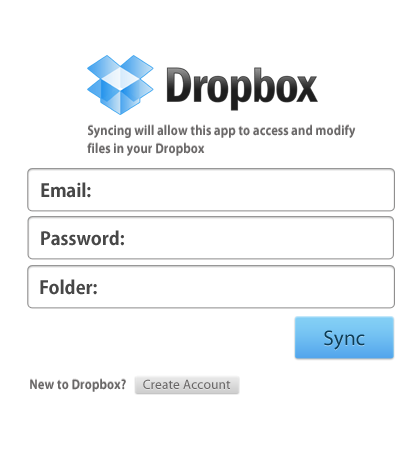
<style>
.page{position:relative;width:420px;height:450px;background:#ffffff}
.page>*{position:absolute;margin:0}
.t1{font:12px/18px "AdobeGothicStd-Bold";letter-spacing:0.008em}
.t2{font:12px/18px "AdobeGothicStd-Bold";letter-spacing:0.008em;color:#696767}
.t3{font:18px "AdobeGothicStd-Bold";color:#474747}
.t4{font:21.1px "MyriadPro-Regular";letter-spacing:0.008em;color:#0d3c54}
.t5{font:12px "AdobeGothicStd-Bold";letter-spacing:0.008em}
.t6{font:12px "AdobeGothicStd-Bold";letter-spacing:0.008em;color:#696767}
.t7{font:13.4px "MyriadPro-Regular";letter-spacing:0.008em;color:#696767}
</style>
<div class="page">
<p class="t1" style="left:87px;top:124px;width:269px;height:31px">Syncing will allow this app to access and modify<br>files in your Dropbox</p>
<p class="t2" style="left:87px;top:125px;width:269px;height:31px">Syncing will allow this app to access and modify<br>files in your Dropbox</p>
<p class="t3" style="left:41px;top:182px;width:50px;height:16px">Email:</p>
<p class="t3" style="left:41px;top:230px;width:83px;height:16px">Password:</p>
<p class="t3" style="left:40px;top:279px;width:57px;height:16px">Folder:</p>
<p class="t4" style="left:324px;top:330px;width:41px;height:20px">Sync</p>
<p class="t5" style="left:30px;top:378px;width:96px;height:13px">New to Dropbox?</p>
<p class="t6" style="left:30px;top:379px;width:96px;height:13px">New to Dropbox?</p>
<p class="t7" style="left:143px;top:379px;width:88px;height:10px">Create Account</p>
</div>
